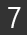
<style>
.page{position:relative;width:27px;height:35px;background:#333333}
.page>*{position:absolute;margin:0}
.t1{font:29px "SegoeUI";color:#ffffff;scale:0.93 1}
</style>
<div class="page">
<p class="t1" style="left:8px;top:7px;width:13px;height:21px">7</p>
</div>
